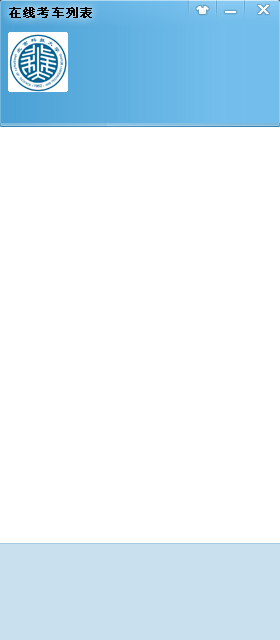
<style>
.page{position:relative;width:280px;height:640px;background:#ffffff}
.page>*{position:absolute;margin:0}
.t1{font:12px "SimSun";letter-spacing:0.1em;color:#000000;font-weight:bold}
</style>
<div class="page">
<p class="t1" style="left:9px;top:7px;width:83px;height:11px">在线考车列表</p>
</div>
